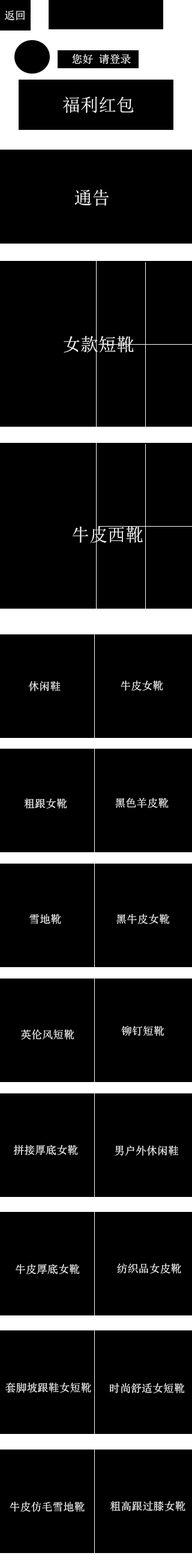
<style>
.page{position:relative;width:192px;height:1568px;background:#000000}
.page>*{position:absolute;margin:0}
.t1{font:10.8px "SimSun";color:#ffffff}
.t2{font:18px "SimSun";color:#ffffff}
</style>
<div class="page">
<p class="t1" style="left:5px;top:10px;width:20px;height:10px">返回</p>
<p class="t1" style="left:72px;top:54px;width:58px;height:10px">您好 请登录</p>
<p class="t2" style="left:63px;top:96px;width:70px;height:17px">福利红包</p>
<p class="t2" style="left:74px;top:189px;width:35px;height:17px">通告</p>
<p class="t2" style="left:63px;top:336px;width:70px;height:17px">女款短靴</p>
<p class="t2" style="left:72px;top:526px;width:70px;height:17px">牛皮西靴</p>
<p class="t1" style="left:28px;top:681px;width:32px;height:10px">休闲鞋</p>
<p class="t1" style="left:120px;top:680px;width:43px;height:11px">牛皮女靴</p>
<p class="t1" style="left:115px;top:798px;width:53px;height:10px">黑色羊皮靴</p>
<p class="t1" style="left:24px;top:798px;width:43px;height:11px">粗跟女靴</p>
<p class="t1" style="left:29px;top:914px;width:32px;height:10px">雪地靴</p>
<p class="t1" style="left:116px;top:914px;width:53px;height:10px">黑牛皮女靴</p>
<p class="t1" style="left:121px;top:1026px;width:43px;height:10px">铆钉短靴</p>
<p class="t1" style="left:21px;top:1029px;width:53px;height:11px">英伦风短靴</p>
<p class="t1" style="left:14px;top:1145px;width:64px;height:10px">拼接厚底女靴</p>
<p class="t1" style="left:114px;top:1145px;width:64px;height:11px">男户外休闲鞋</p>
<p class="t1" style="left:16px;top:1264px;width:64px;height:10px">牛皮厚底女靴</p>
<p class="t1" style="left:117px;top:1263px;width:64px;height:11px">纺织品女皮靴</p>
<p class="t1" style="left:5px;top:1382px;width:86px;height:11px">套脚坡跟鞋女短靴</p>
<p class="t1" style="left:110px;top:1383px;width:74px;height:10px">时尚舒适女短靴</p>
<p class="t1" style="left:10px;top:1502px;width:74px;height:10px">牛皮仿毛雪地靴</p>
<p class="t1" style="left:110px;top:1501px;width:75px;height:10px">粗高跟过膝女靴</p>
</div>
